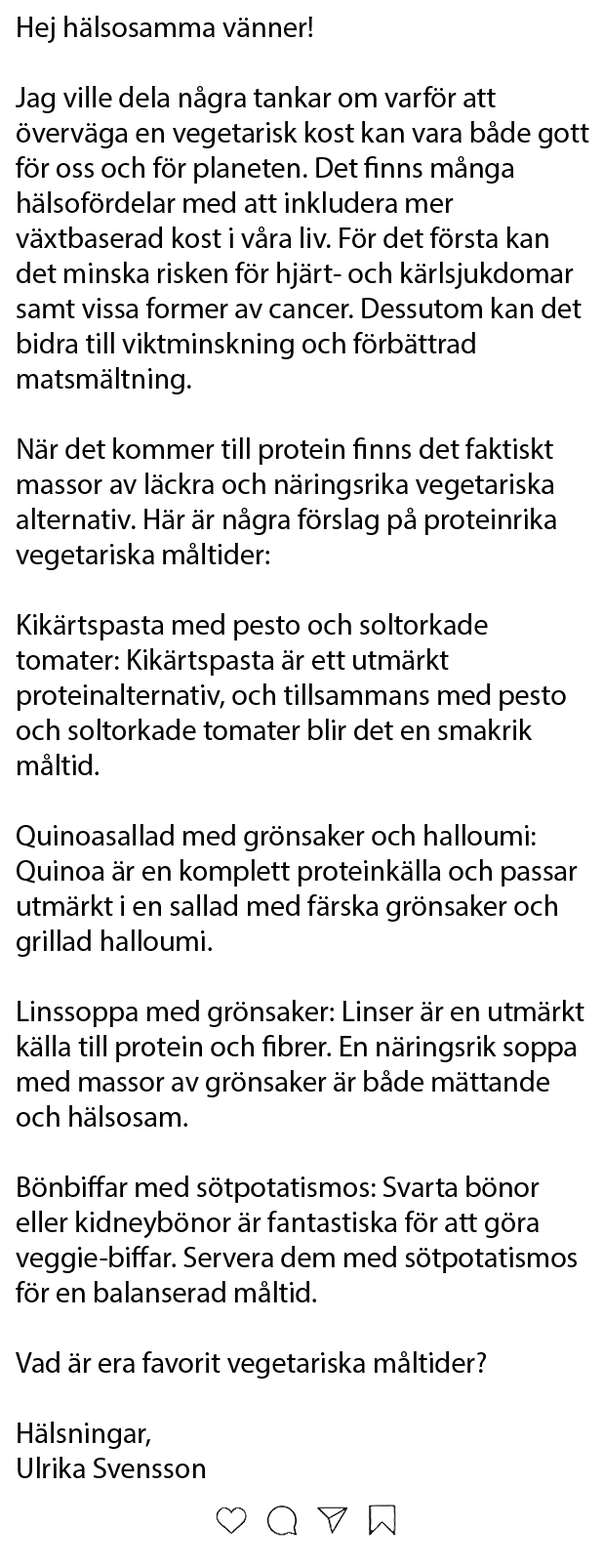
<style>
.page{position:relative;width:603px;height:1568px;background:#ffffff}
.page>*{position:absolute;margin:0}
.t1{font:29.3px "MyriadPro-Regular";color:#000000}
</style>
<div class="page">
<p class="t1" style="left:16px;top:16px;width:574px;height:1462px">Hej hälsosamma vänner!<br><br>Jag ville dela några tankar om varför att överväga en vegetarisk kost kan vara både gott för oss och för planeten. Det finns många hälsofördelar med att inkludera mer växtbaserad kost i våra liv. För det första kan det minska risken för hjärt- och kärlsjukdomar samt vissa former av cancer. Dessutom kan det bidra till viktminskning och förbättrad matsmältning.<br><br>När det kommer till protein finns det faktiskt massor av läckra och näringsrika vegetariska alternativ. Här är några förslag på proteinrika vegetariska måltider:<br><br>Kikärtspasta med pesto och soltorkade tomater: Kikärtspasta är ett utmärkt proteinalternativ, och tillsammans med pesto och soltorkade tomater blir det en smakrik måltid.<br><br>Quinoasallad med grönsaker och halloumi: Quinoa är en komplett proteinkälla och passar utmärkt i en sallad med färska grönsaker och grillad halloumi.<br><br>Linssoppa med grönsaker: Linser är en utmärkt källa till protein och fibrer. En näringsrik soppa med massor av grönsaker är både mättande och hälsosam.<br><br>Bönbiffar med sötpotatismos: Svarta bönor eller kidneybönor är fantastiska för att göra veggie-biffar. Servera dem med sötpotatismos för en balanserad måltid.<br><br>Vad är era favorit vegetariska måltider?<br><br>Hälsningar,<br>Ulrika Svensson</p>
</div>
